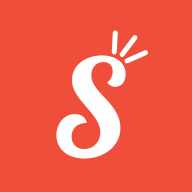
<style>
.page{position:relative;width:192px;height:192px;background:#ef4e3a}
.page>*{position:absolute;margin:0}
.t1{font:133.3px "Lobster-Regular";color:#fefefe}
</style>
<div class="page">
<p class="t1" style="left:56px;top:55px;width:70px;height:104px">S</p>
</div>
